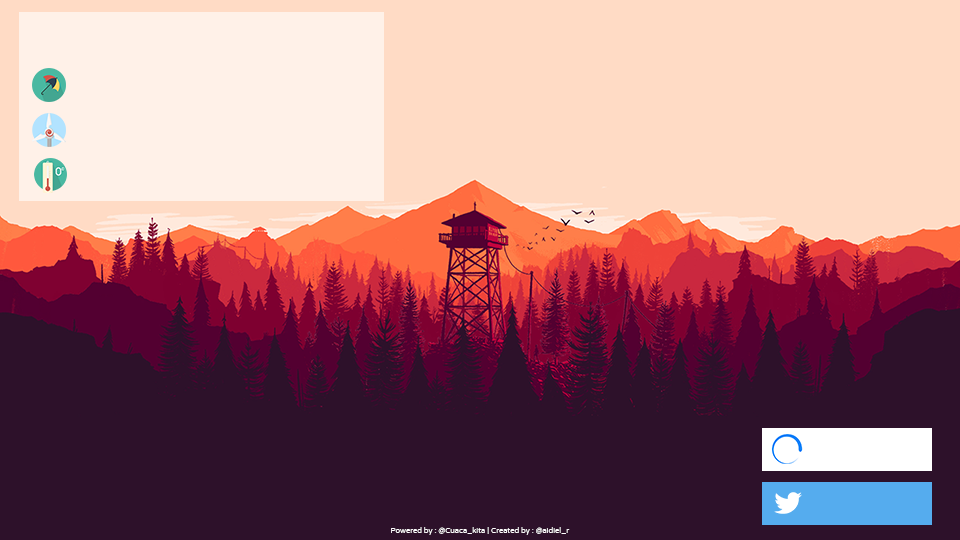
<style>
.page{position:relative;width:960px;height:540px;background:#2d112a}
.page>*{position:absolute;margin:0}
.t1{font:7.5px "VarelaRound-Regular";color:#fefefe}
</style>
<div class="page">
<p class="t1" style="left:391px;top:527px;width:179px;height:8px">Powered by : @Cuaca_kita | Created by : @aidiel_r</p>
</div>
